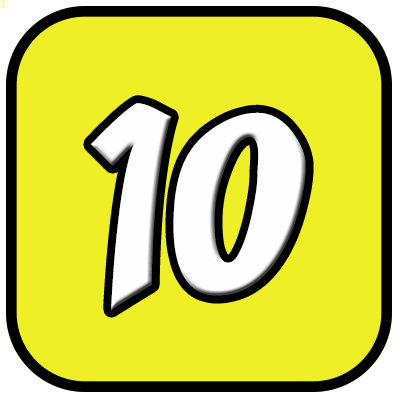
<style>
.page{position:relative;width:400px;height:400px;background:#efef28}
.page>*{position:absolute;margin:0}
.t1{font:10.7px "LucidaConsole";color:#ffff66}
.t2{font:240px "Yikes";color:#fefefe}
</style>
<div class="page">
<p class="t1" style="left:0px;top:0px;width:7px;height:8px">1</p>
<p class="t2" style="left:91px;top:103px;width:215px;height:207px">10</p>
</div>
